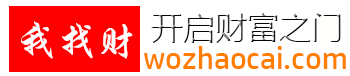
<style>
.page{position:relative;width:350px;height:76px;background:#ffffff}
.page>*{position:absolute;margin:0}
.t1{font:40px "STXingkai";color:#fffefe}
.t2{font:32px "HPSimplified-Regular";color:#ff7e00}
</style>
<div class="page">
<p class="t1" style="left:21px;top:21px;width:112px;height:38px">我找财</p>
<p class="t2" style="left:144px;top:46px;width:202px;height:23px">wozhaocai.com</p>
</div>
